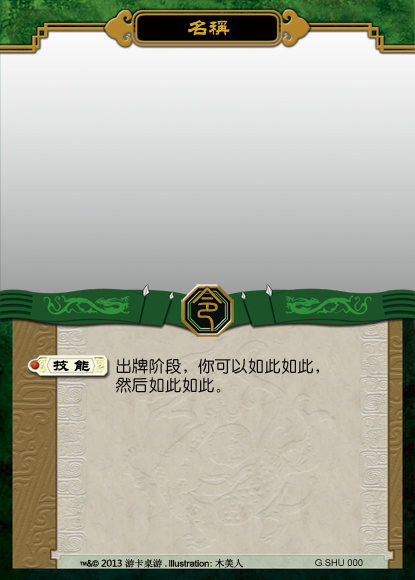
<style>
.page{position:relative;width:415px;height:580px}
.page>*{position:absolute;margin:0}
.t1{font:21.2px "FZL2FW--GB1-0";color:#d1a82d}
.t2{font:44.8px "FZuanSu";color:#b0832e;scale:1.2 1}
.t3{font:15.9px "FZL2FW--GB1-0";letter-spacing:0.26em;color:#040000;font-weight:bold;scale:1.04 1}
.t4{font:16.5px/21.2px "HYe3gj";color:#0f0c0b}
.t5{font:9.4px "SimSun";color:#040000}
.t6{font:9px "ArialMT";color:#040000;scale:1.05 1}
.t7{font:9px "ArialMT";color:#040000;scale:0.91 1}
.t8{font:9px "ArialMT";color:#040000;scale:0.95 1}
.t9{font:8.5px "ArialMT";color:#040000}
.t10{font:9px "MicrosoftYaHei";color:#040000;scale:1.05 1}
.t11{font:9px "SimSun";color:#040000;scale:1.05 1}
.t12{font:9.4px "ArialMT"}
</style>
<div class="page">
<p class="t1" style="left:188px;top:20px;width:42px;height:16px">名称</p>
<p class="t2" style="left:192px;top:287px;width:30px;height:45px">令</p>
<p class="t3" style="left:53px;top:360px;width:37px;height:12px">技能</p>
<p class="t4" style="left:115px;top:358px;width:204px;height:35px">出牌阶段，你可以如此如此，<br>然后如此如此。</p>
<p class="t5" style="left:215px;top:558px;width:28px;height:10px">木美人</p>
<p class="t6" style="left:80px;top:559px;width:132px;height:9px"><span class="t7">™</span><span class="t8">&amp;</span><span class="t9">© </span><span class="t10">2013 </span><span class="t11">游卡桌游 .</span>lllustration<span class="t11">:</span></p>
<p class="t12" style="left:315px;top:559px;width:48px;height:7px">G.SHU 000</p>
</div>
